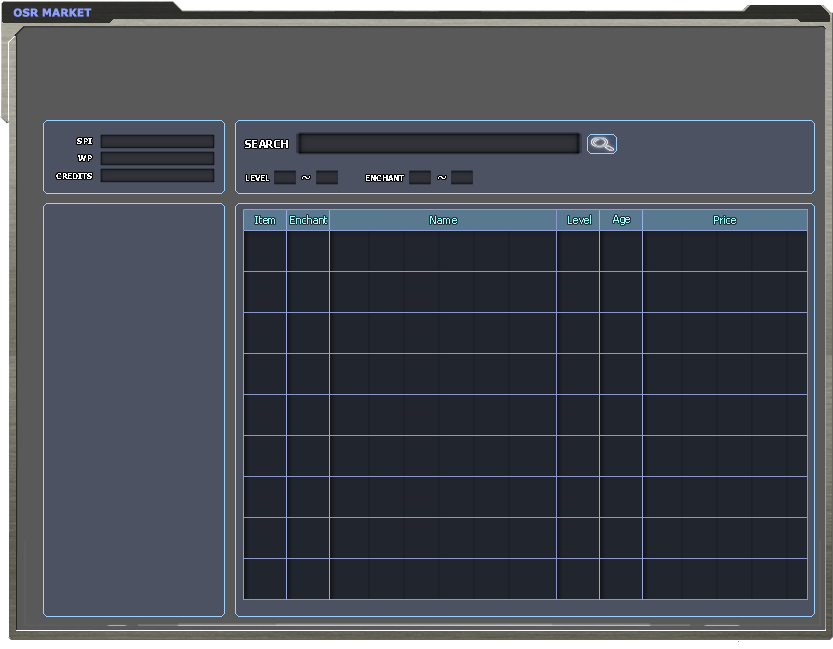
<style>
.page{position:relative;width:833px;height:649px;background:#21252e}
.page>*{position:absolute;margin:0}
.t1{font:10.7px "Verdana-Bold";color:#8ea0ff}
.t2{font:8px "Tahoma-Bold";color:#ffffff}
.t3{font:10.7px "Tahoma-Bold";color:#ffffff}
.t4{font:10.7px "Tahoma";color:#a4fff7}
</style>
<div class="page">
<p class="t1" style="left:13px;top:8px;width:79px;height:9px">OSR MARKET</p>
<p class="t2" style="left:77px;top:138px;width:15px;height:6px">SPI</p>
<p class="t3" style="left:245px;top:140px;width:43px;height:8px">SEARCH</p>
<p class="t2" style="left:78px;top:155px;width:14px;height:6px">WP</p>
<p class="t2" style="left:56px;top:173px;width:36px;height:6px">CREDITS</p>
<p class="t2" style="left:246px;top:175px;width:23px;height:6px">LEVEL</p>
<p class="t3" style="left:302px;top:176px;width:8px;height:3px">~</p>
<p class="t2" style="left:366px;top:175px;width:38px;height:6px">ENCHANT</p>
<p class="t3" style="left:438px;top:176px;width:8px;height:3px">~</p>
<p class="t4" style="left:255px;top:216px;width:20px;height:8px">Item</p>
<p class="t4" style="left:290px;top:215px;width:37px;height:9px">Enchant</p>
<p class="t4" style="left:430px;top:216px;width:27px;height:8px">Name</p>
<p class="t4" style="left:568px;top:215px;width:23px;height:9px">Level</p>
<p class="t4" style="left:613px;top:215px;width:17px;height:10px">Age</p>
<p class="t4" style="left:714px;top:216px;width:22px;height:8px">Price</p>
</div>
